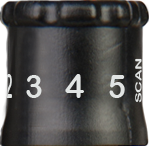
<style>
.page{position:relative;width:149px;height:146px}
.page>*{position:absolute;margin:0}
.t1{font:8.8px "ArialRoundedMTBold";letter-spacing:-0.01em;color:#e1e4e3;scale:1.82 1}
.t2{font:32.5px "ArialRoundedMTBold";letter-spacing:-0.01em;color:#e1e4e3;scale:0.36 1}
.t3{font:32.5px "ArialRoundedMTBold";letter-spacing:-0.01em;color:#e1e4e3;scale:0.93 1}
.t4{font:33.3px "ArialRoundedMTBold";letter-spacing:-0.01em;color:#e1e4e3}
</style>
<div class="page">
<p class="t1" style="left:135px;top:58px;width:7px;height:45px;rotate:-90deg">SCAN</p>
<p class="t2" style="left:5px;top:74px;width:7px;height:24px">2</p>
<p class="t3" style="left:26px;top:75px;width:16px;height:23px">3</p>
<p class="t4" style="left:65px;top:74px;width:19px;height:24px">4</p>
<p class="t3" style="left:109px;top:75px;width:16px;height:23px">5</p>
</div>
